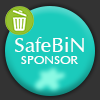
<style>
.page{position:relative;width:100px;height:100px;background:#1bcbbc}
.page>*{position:absolute;margin:0}
.t1{font:20.8px "Ace";color:#ffffff}
.t2{font:12.5px "Ace";color:#ffffff}
</style>
<div class="page">
<p class="t1" style="left:15px;top:37px;width:69px;height:15px">SafeBiN</p>
<p class="t2" style="left:21px;top:56px;width:57px;height:8px">SPONSOR</p>
</div>
